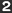
<style>
.page{position:relative;width:12px;height:13px}
.page>*{position:absolute;margin:0}
.t1{font:13.9px "K2D-ExtraBold";color:#ffffff}
</style>
<div class="page">
<p class="t1" style="left:2px;top:1px;width:9px;height:11px">2</p>
</div>
